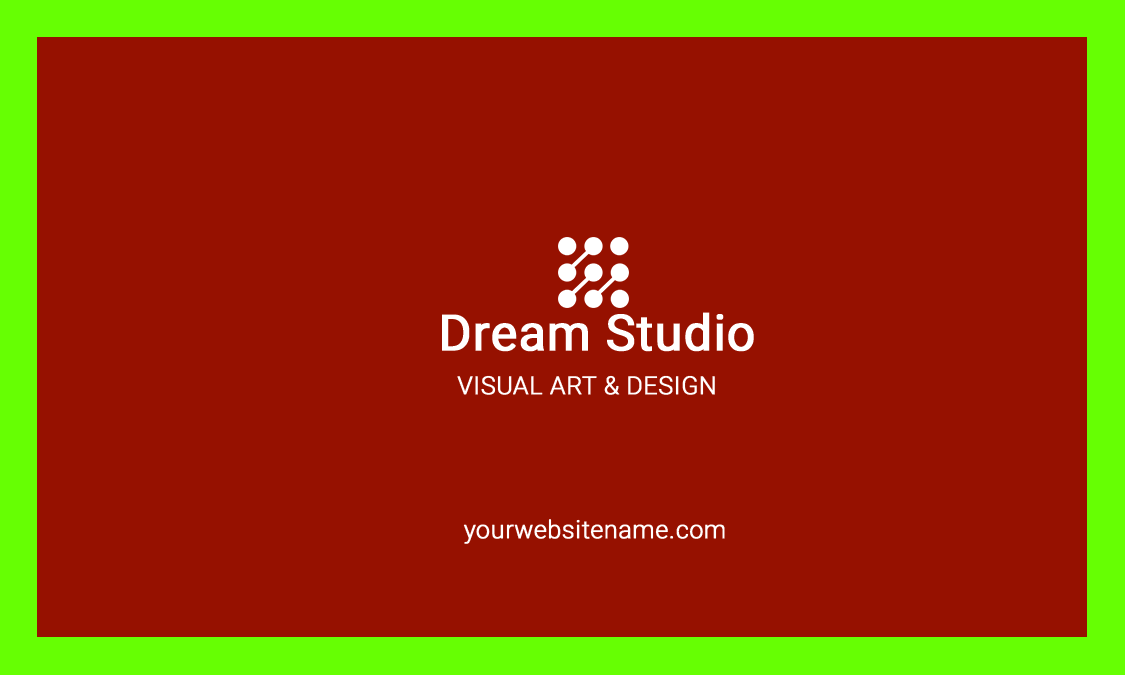
<style>
.page{position:relative;width:1125px;height:675px;background:#961100}
.page>*{position:absolute;margin:0}
.t1{font:50px "Roboto-Regular";color:#ffffff;font-weight:bold}
.t2{font:25px "Roboto-Light";color:#ffffff;font-weight:bold}
</style>
<div class="page">
<p class="t1" style="left:442px;top:312px;width:312px;height:40px">Dream Studio</p>
<p class="t2" style="left:457px;top:375px;width:258px;height:20px">VISUAL ART &amp; DESIGN</p>
<p class="t2" style="left:463px;top:519px;width:262px;height:25px">yourwebsitename.com</p>
</div>
